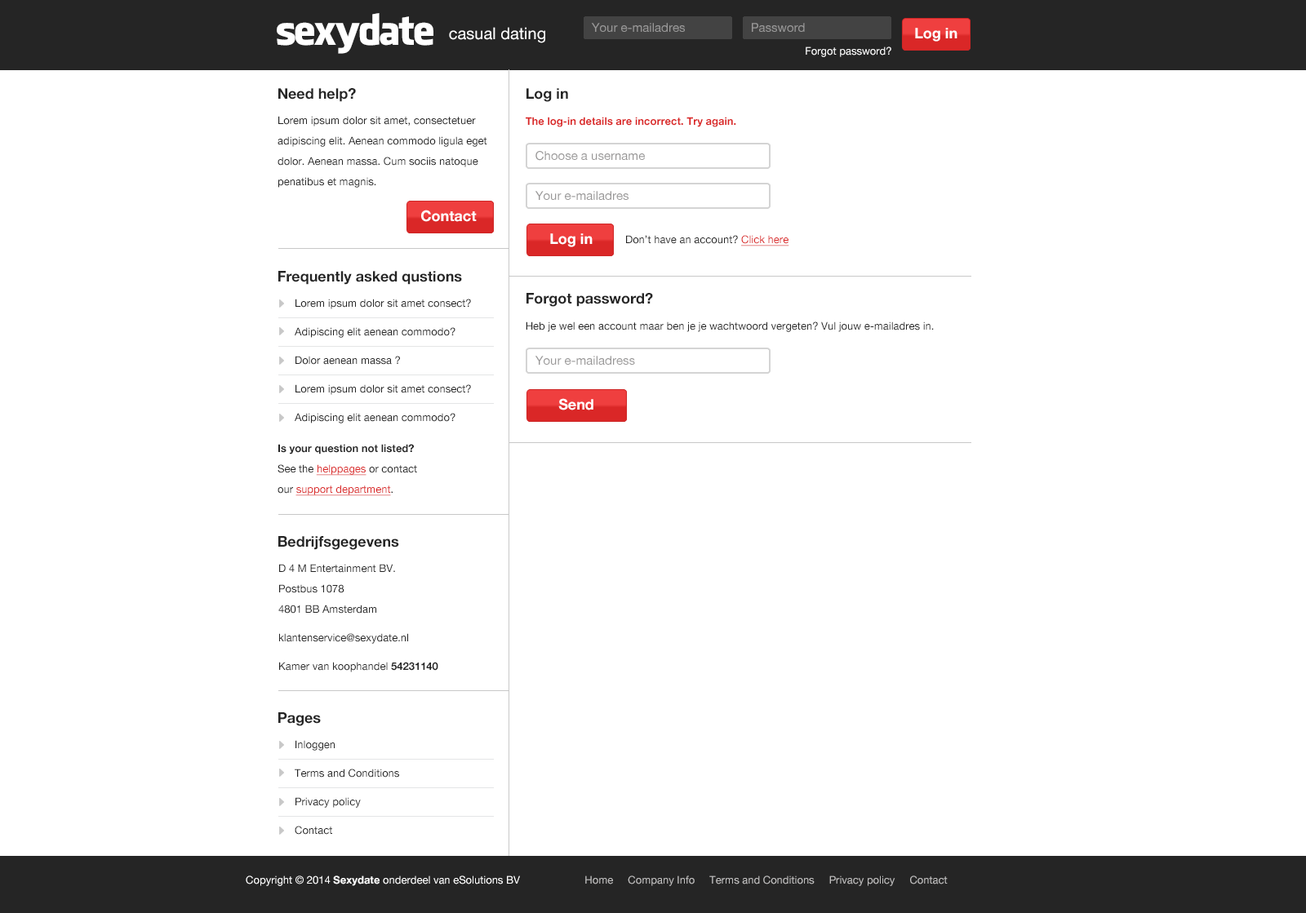
<style>
.page{position:relative;width:1306px;height:913px;background:#ffffff}
.page>*{position:absolute;margin:0}
.t1{font:40.8px "FacebookLetterFaces";letter-spacing:-0.05em;color:#ffffff}
.t2{font:16.3px "HelveticaNeue";color:#ffffff}
.t3{font:12.2px "HelveticaNeue";color:#999898}
.t4{font:14.7px "HelveticaNeue-Bold";color:#ffffff}
.t5{font:10.6px "HelveticaNeue";color:#ffffff}
.t6{font:14.7px "HelveticaNeue-Bold";color:#252525}
.t7{font:10.6px/20.4px "HelveticaNeue";color:#252525}
.t8{font:10.6px "HelveticaNeue-Bold";color:#da2727}
.t9{font:10.6px "HelveticaNeue";color:#252525}
.t10{font:10.6px "HelveticaNeue";color:#da2727;text-decoration:underline}
.t11{font:10.6px/28.6px "HelveticaNeue";color:#252525}
.t12{font:10.6px/20.4px "HelveticaNeue-Bold";color:#252525}
.t13{font:10.6px/20.4px "HelveticaNeue";color:#da2727;text-decoration:underline}
.t14{font:10.6px/28.6px "HelveticaNeue-Bold";color:#252525}
.t15{font:10.6px "HelveticaNeue";color:#c1c0c0}
.t16{font:10.6px "HelveticaNeue-Bold";color:#ffffff}
</style>
<div class="page">
<p class="t1" style="left:277px;top:13px;width:156px;height:41px">sexydate</p>
<p class="t2" style="left:449px;top:27px;width:96px;height:16px">casual dating</p>
<p class="t3" style="left:591px;top:23px;width:94px;height:9px">Your e-mailadres</p>
<p class="t3" style="left:752px;top:23px;width:53px;height:9px">Password</p>
<p class="t4" style="left:915px;top:28px;width:42px;height:14px">Log in</p>
<p class="t5" style="left:805px;top:47px;width:86px;height:10px">Forgot password?</p>
<p class="t6" style="left:278px;top:88px;width:78px;height:14px">Need help?</p>
<p class="t6" style="left:526px;top:88px;width:42px;height:14px">Log in</p>
<p class="t7" style="left:277px;top:116px;width:210px;height:72px">Lorem ipsum dolor sit amet, consectetuer <br>adipiscing elit. Aenean commodo ligula eget <br>dolor. Aenean massa. Cum sociis natoque <br>penatibus et magnis.</p>
<p class="t8" style="left:526px;top:117px;width:210px;height:10px">The log-in details are incorrect. Try again.</p>
<p class="t3" style="left:535px;top:151px;width:110px;height:10px">Choose a username</p>
<p class="t3" style="left:535px;top:191px;width:93px;height:9px">Your e-mailadres</p>
<p class="t4" style="left:421px;top:210px;width:56px;height:12px">Contact</p>
<p class="t4" style="left:550px;top:233px;width:42px;height:14px">Log in</p>
<p class="t9" style="left:626px;top:235px;width:163px;height:11px">Don’t have an account? <span class="t10">Click here</span></p>
<p class="t6" style="left:278px;top:271px;width:184px;height:14px">Frequently asked qustions</p>
<p class="t6" style="left:526px;top:293px;width:127px;height:14px">Forgot password?</p>
<p class="t11" style="left:295px;top:299px;width:176px;height:125px">Lorem ipsum dolor sit amet consect?<br>Adipiscing elit aenean commodo?<br>Dolor aenean massa ?<br>Lorem ipsum dolor sit amet consect?<br>Adipiscing elit aenean commodo?</p>
<p class="t9" style="left:526px;top:322px;width:408px;height:10px">Heb je wel een account maar ben je je wachtwoord vergeten? Vul jouw e-mailadres in.</p>
<p class="t3" style="left:535px;top:356px;width:100px;height:9px">Your e-mailadress</p>
<p class="t4" style="left:558px;top:398px;width:35px;height:12px">Send</p>
<p class="t12" style="left:277px;top:444px;width:140px;height:52px">Is your question not listed? <br><span class="t7">See the </span><span class="t13">helppages</span><span class="t7"> or contact <br>our </span><span class="t13">support department</span><span class="t7">.</span></p>
<p class="t6" style="left:278px;top:536px;width:121px;height:14px">Bedrijfsgegevens</p>
<p class="t7" style="left:278px;top:564px;width:160px;height:108px">D 4 M Entertainment BV.<br>Postbus 1078<br>4801 BB Amsterdam<br><span class="t11">klantenservice@sexydate.nl<br>Kamer van koophandel </span><span class="t14">54231140</span></p>
<p class="t6" style="left:278px;top:712px;width:43px;height:14px">Pages</p>
<p class="t11" style="left:295px;top:740px;width:104px;height:95px">Inloggen<br>Terms and Conditions<br>Privacy policy<br>Contact</p>
<p class="t15" style="left:246px;top:876px;width:701px;height:10px"><span class="t5">Copyright © 2014 </span><span class="t16">Sexydate</span><span class="t5"> onderdeel van eSolutions BV</span>                      Home     Company Info     Terms and Conditions     Privacy policy     Contact</p>
</div>
